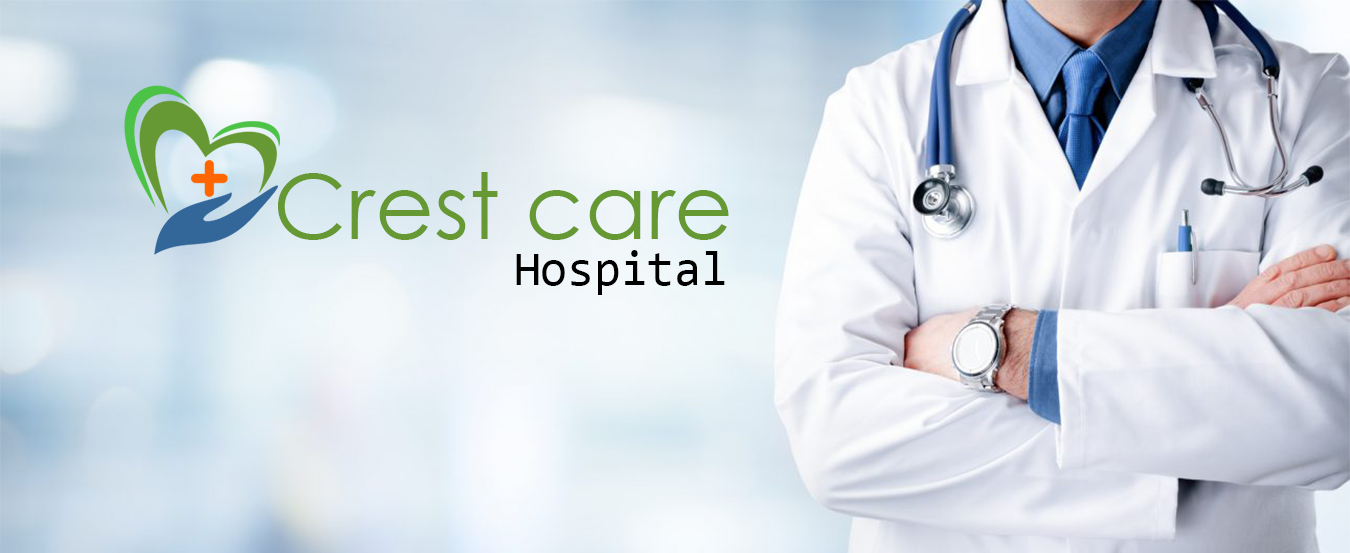
<style>
.page{position:relative;width:1350px;height:553px}
.page>*{position:absolute;margin:0}
.t1{font:91.3px "CenturyGothic";color:#669933}
.t2{font:48.6px "Consolas";color:#000000}
</style>
<div class="page">
<p class="t1" style="left:278px;top:172px;width:451px;height:68px">Crest care</p>
<p class="t2" style="left:516px;top:250px;width:209px;height:45px">Hospital</p>
</div>
